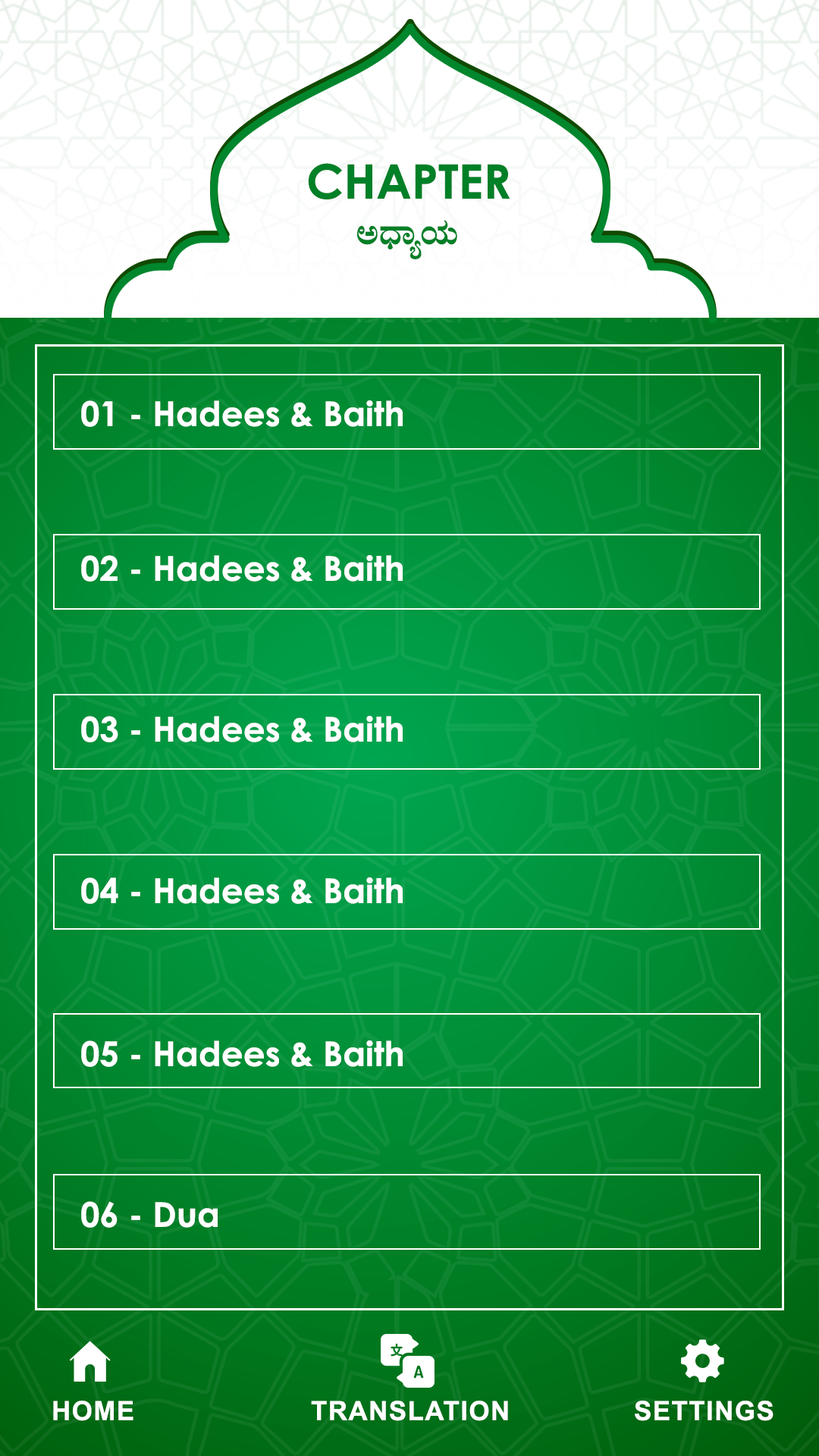
<style>
.page{position:relative;width:819px;height:1456px}
.page>*{position:absolute;margin:0}
.t1{font:47.5px "CenturyGothic-Bold";color:#008027}
.t2{font:36.4px "Nudi01eBold";color:#008027}
.t3{font:34.1px "CenturyGothic-Bold";color:#ffffff}
.t4{font:26.5px "Arial-BoldMT";letter-spacing:0.04em;color:#ffffff}
</style>
<div class="page">
<p class="t1" style="left:308px;top:163px;width:202px;height:36px">CHAPTER</p>
<p class="t2" style="left:357px;top:220px;width:100px;height:39px">CzsÁåAiÀÄ</p>
<p class="t3" style="left:81px;top:400px;width:322px;height:27px">01 - Hadees &amp; Baith</p>
<p class="t3" style="left:81px;top:555px;width:322px;height:27px">02 - Hadees &amp; Baith</p>
<p class="t3" style="left:81px;top:716px;width:322px;height:26px">03 - Hadees &amp; Baith</p>
<p class="t3" style="left:81px;top:877px;width:322px;height:27px">04 - Hadees &amp; Baith</p>
<p class="t3" style="left:81px;top:1040px;width:322px;height:27px">05 - Hadees &amp; Baith</p>
<p class="t3" style="left:81px;top:1201px;width:137px;height:27px">06 - Dua</p>
<p class="t4" style="left:53px;top:1401px;width:80px;height:20px">HOME</p>
<p class="t4" style="left:311px;top:1401px;width:197px;height:20px">TRANSLATION</p>
<p class="t4" style="left:635px;top:1401px;width:138px;height:20px">SETTINGS</p>
</div>
